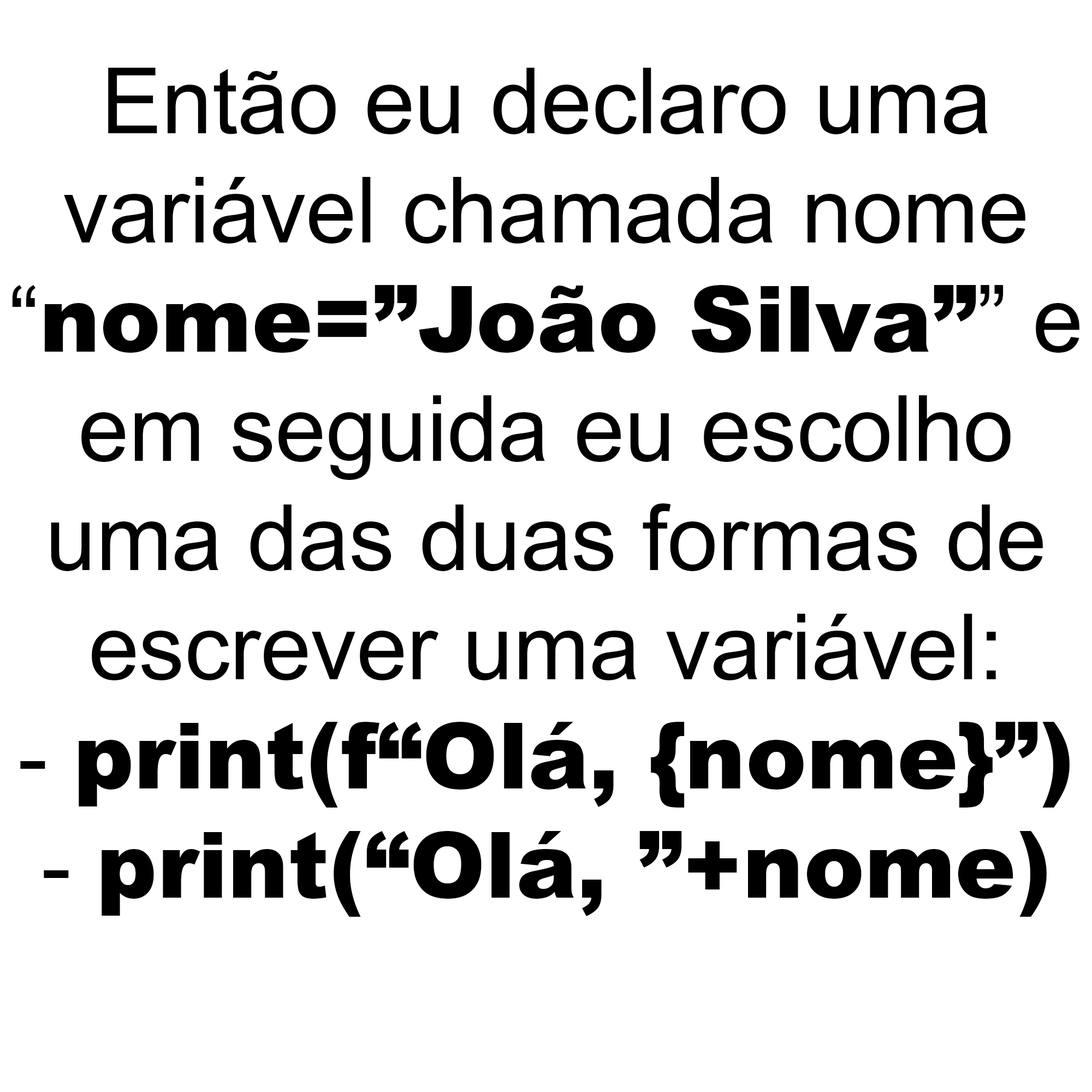
<style>
.page{position:relative;width:1092px;height:1092px;background:#ffffff}
.page>*{position:absolute;margin:0}
.t1{font:91px "ArialMT";color:#000000}
.t2{font:91px "Arial-Black";color:#000000}
</style>
<div class="page">
<p class="t1" style="left:12px;top:68px;width:1067px;height:849px;text-align:center">Então eu declaro uma<br>variável chamada nome<br>“<span class="t2">nome=”João Silva”</span>” e<br>em seguida eu escolho<br>uma das duas formas de<br>escrever uma variável:<br>- <span class="t2">print(f“Olá, {nome}”)<br></span>- <span class="t2">print(“Olá, ”+nome)</span></p>
</div>
